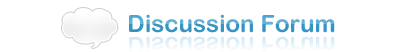
<style>
.page{position:relative;width:400px;height:52px;background:#ffffff}
.page>*{position:absolute;margin:0}
.t1{font:24px "ArialRoundedMTBold"}
</style>
<div class="page">
<p class="t1" style="left:129px;top:14px;width:206px;height:19px">Discussion Forum</p>
</div>
